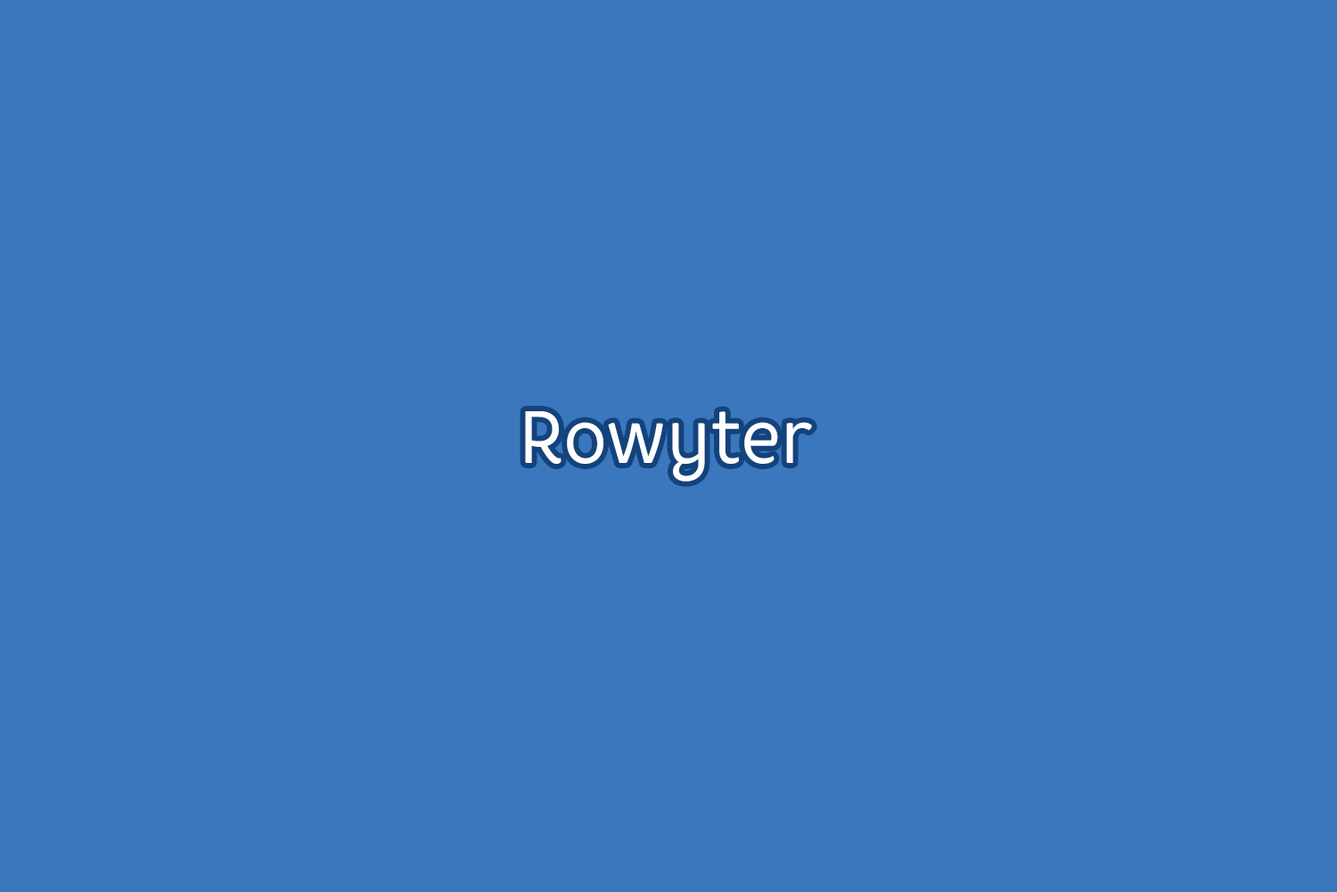
<style>
.page{position:relative;width:1337px;height:892px;background:#3b77bd}
.page>*{position:absolute;margin:0}
.t1{font:74px "CoreRhino45Regular";color:#ffffff;scale:0.94 1}
</style>
<div class="page">
<p class="t1" style="left:525px;top:411px;width:287px;height:70px">Rowyter</p>
</div>
